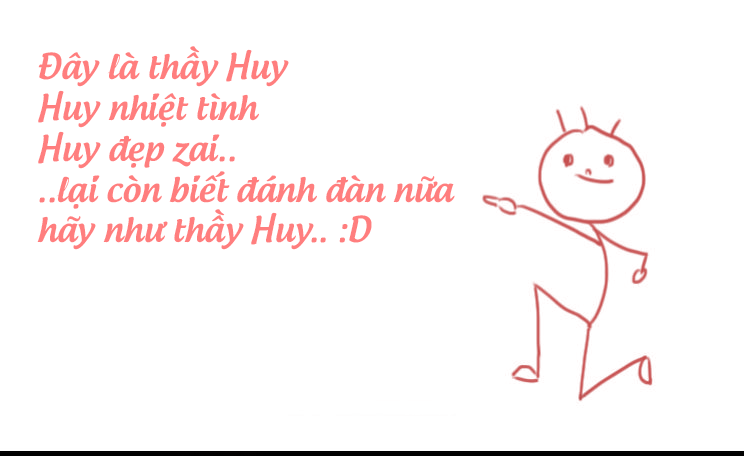
<style>
.page{position:relative;width:744px;height:456px;background:#ffffff}
.page>*{position:absolute;margin:0}
.t1{font:34px "UTM-Androgyne";color:#ff7e7e}
</style>
<div class="page">
<p class="t1" style="left:37px;top:46px;width:418px;height:204px">Đây là thầy Huy<br>Huy nhiệt tình<br>Huy đẹp zai..<br>..lại còn biết đánh đàn nữa<br>hãy như thầy Huy.. :D</p>
</div>
